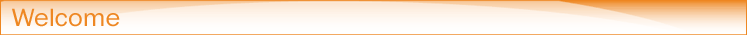
<style>
.page{position:relative;width:747px;height:35px}
.page>*{position:absolute;margin:0}
.t1{font:26px "FranklinGothic-Book";color:#ee8722;scale:1.1 1}
</style>
<div class="page">
<p class="t1" style="left:12px;top:8px;width:108px;height:19px">Welcome</p>
</div>
